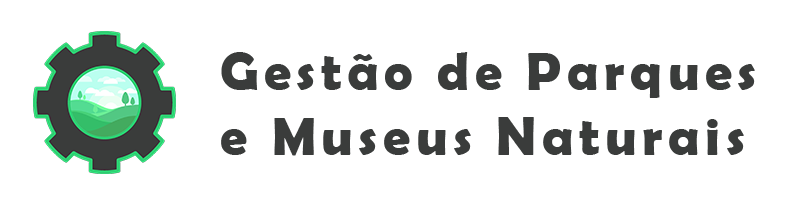
<style>
.page{position:relative;width:808px;height:212px;background:#ffffff}
.page>*{position:absolute;margin:0}
.t1{font:54.2px "BerlinSansFBDemi-Bold";letter-spacing:0.1em;color:#3a3c3b}
</style>
<div class="page">
<p class="t1" style="left:221px;top:52px;width:534px;height:104px">Gestão de Parques<br>e Museus Naturais</p>
</div>
